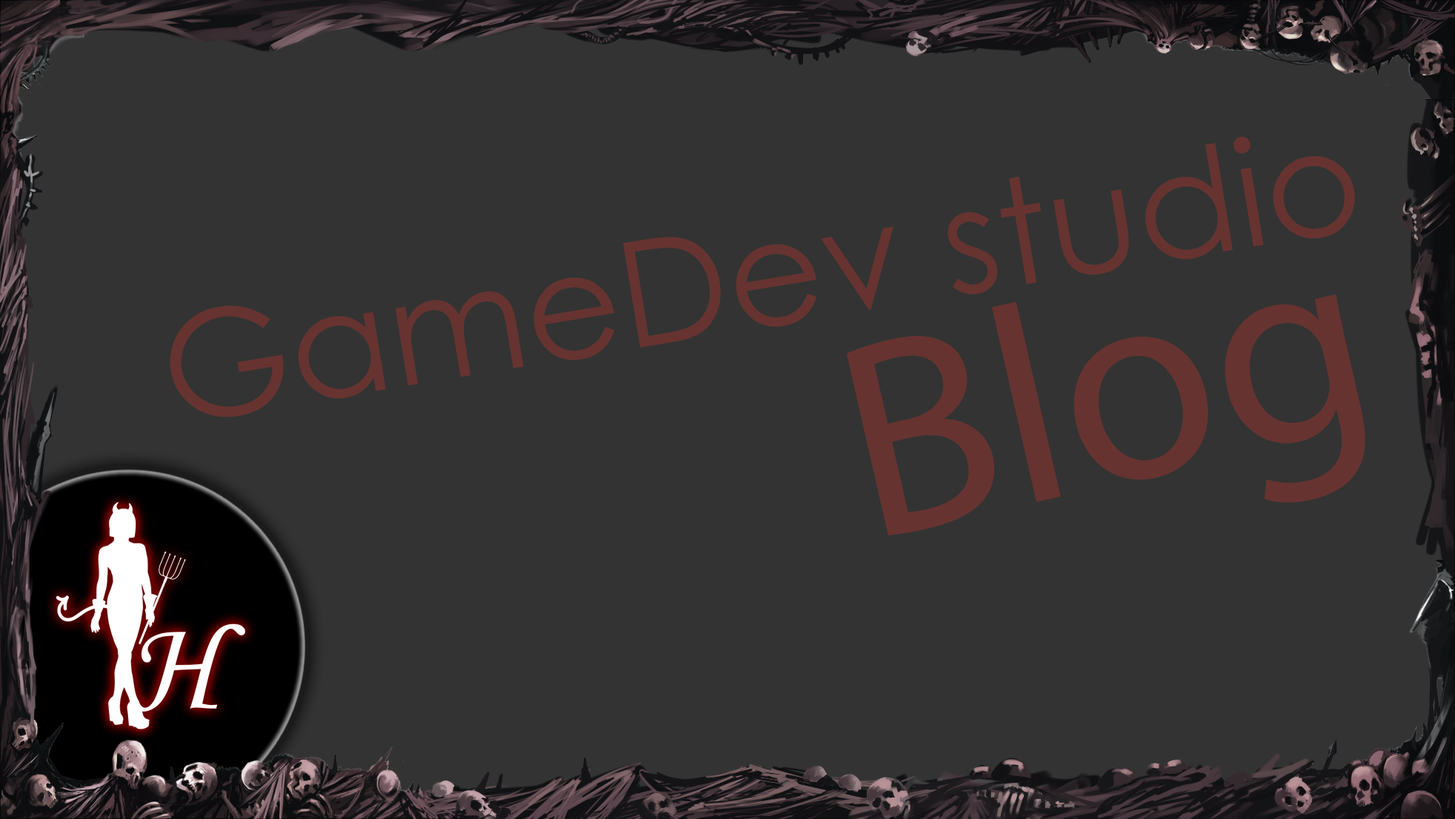
<style>
.page{position:relative;width:1455px;height:819px;background:#333333}
.page>*{position:absolute;margin:0}
.t1{font:147.2px "CenturyGothic";color:#663330}
.t2{font:281.3px "MyriadPro-Regular";color:#663330}
</style>
<div class="page">
<p class="t1" style="left:170px;top:136px;width:1185px;height:282px;rotate:-9deg">GameDev studio</p>
<p class="t2" style="left:846px;top:294px;width:520px;height:242px;rotate:-13deg">Blog</p>
</div>
